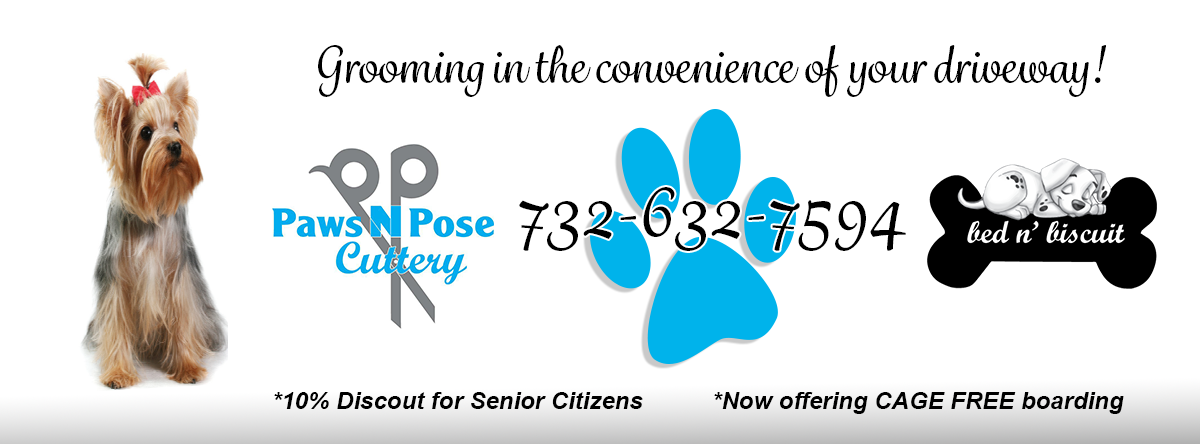
<style>
.page{position:relative;width:1200px;height:444px;background:#ffffff}
.page>*{position:absolute;margin:0}
.t1{font:48px "GrafolitaScript-Medium";color:#000000}
.t2{font:72px "GrafolitaScript-Medium";color:#000000}
.t3{font:24px "Arial-BoldItalicMT";color:#000000}
</style>
<div class="page">
<p class="t1" style="left:318px;top:45px;width:788px;height:52px">Grooming in the convenience of your driveway!</p>
<p class="t2" style="left:519px;top:187px;width:387px;height:64px">732-632-7594</p>
<p class="t3" style="left:274px;top:392px;width:369px;height:17px">*10% Discout for Senior Citizens</p>
<p class="t3" style="left:714px;top:392px;width:410px;height:22px">*Now offering CAGE FREE boarding</p>
</div>
